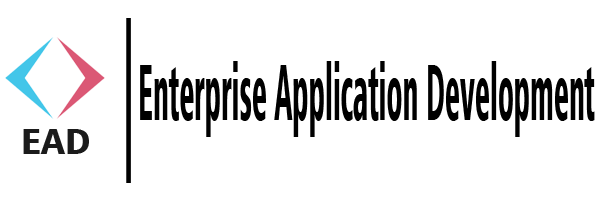
<style>
.page{position:relative;width:600px;height:200px;background:#ffffff}
.page>*{position:absolute;margin:0}
.t1{font:164.4px "Humanist777BT-BlackCondensedB";color:#000000;scale:0.28 1}
.t2{font:79.4px "Humanist777BT-BlackCondensedB";color:#000000;scale:0.37 1}
.t3{font:36px "Humanist777BT-BlackCondensedB";color:#1b1b1b;scale:1.09 1}
</style>
<div class="page">
<p class="t1" style="left:126px;top:18px;width:5px;height:165px">|</p>
<p class="t2" style="left:140px;top:61px;width:455px;height:76px">Enterprise Application Development</p>
<p class="t3" style="left:23px;top:129px;width:66px;height:25px">EAD</p>
</div>
